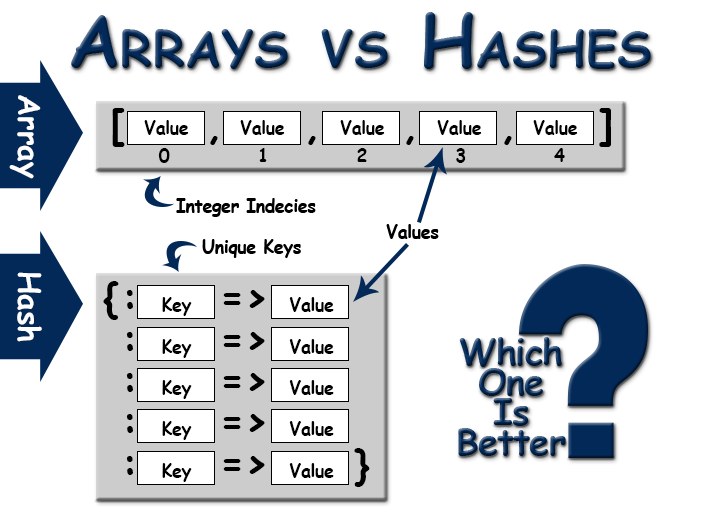
<style>
.page{position:relative;width:720px;height:520px;background:#ffffff}
.page>*{position:absolute;margin:0}
.t1{font:72px "ComicSansMS-Bold";font-variant:small-caps}
.t2{font:30px "ComicSansMS-Bold";color:#fffefe}
.t3{font:40px "ComicSansMS-Bold";letter-spacing:-0.025em;color:#000000}
.t4{font:18px "ComicSansMS-Bold";letter-spacing:-0.025em;color:#000000}
.t5{font:36px/30px "ComicSansMS-Bold";letter-spacing:-0.025em}
</style>
<div class="page">
<p class="t1" style="left:71px;top:12px;width:580px;height:57px">Arrays vs Hashes</p>
<p class="t2" style="left:9px;top:95px;width:32px;height:84px;rotate:90deg">Array</p>
<p class="t3" style="left:112px;top:108px;width:499px;height:39px">[     ,     ,     ,     ,     ]</p>
<p class="t4" style="left:144px;top:120px;width:45px;height:15px">Value</p>
<p class="t4" style="left:240px;top:120px;width:45px;height:15px">Value</p>
<p class="t4" style="left:340px;top:120px;width:45px;height:15px">Value</p>
<p class="t4" style="left:437px;top:120px;width:45px;height:15px">Value</p>
<p class="t4" style="left:533px;top:120px;width:45px;height:15px">Value</p>
<p class="t4" style="left:158px;top:148px;width:407px;height:15px">0            1            2            3            4</p>
<p class="t4" style="left:176px;top:198px;width:140px;height:19px">Integer Indecies</p>
<p class="t4" style="left:386px;top:224px;width:53px;height:15px">Values</p>
<p class="t4" style="left:202px;top:239px;width:99px;height:19px">Unique Keys</p>
<p class="t2" style="left:17px;top:272px;width:25px;height:70px;rotate:90deg">Hash</p>
<p class="t3" style="left:103px;top:281px;width:16px;height:39px">{</p>
<p class="t4" style="left:126px;top:290px;width:208px;height:26px"><span class="t3"> :  </span>Key    <span class="t3">=&gt;</span>   Value</p>
<p class="t4" style="left:126px;top:332px;width:208px;height:26px"><span class="t3"> :  </span>Key    <span class="t3">=&gt;</span>   Value</p>
<p class="t5" style="left:458px;top:337px;width:108px;height:119px;text-align:center">Which<br>One<br>Is<br>Better</p>
<p class="t4" style="left:126px;top:373px;width:208px;height:26px"><span class="t3"> :  </span>Key    <span class="t3">=&gt;</span>   Value</p>
<p class="t4" style="left:126px;top:414px;width:208px;height:26px"><span class="t3"> :  </span>Key    <span class="t3">=&gt;</span>   Value</p>
<p class="t3" style="left:354px;top:448px;width:16px;height:39px">}</p>
<p class="t4" style="left:126px;top:456px;width:208px;height:26px"><span class="t3"> :  </span>Key    <span class="t3">=&gt;</span>   Value</p>
</div>
